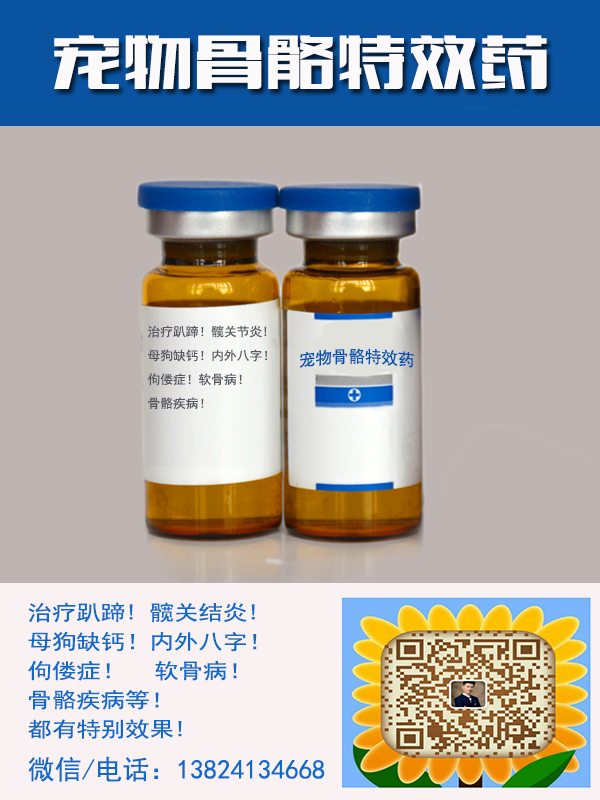
<style>
.page{position:relative;width:600px;height:800px;background:#beb4b2}
.page>*{position:absolute;margin:0}
.t1{font:71.8px "FZCTHJW--GB1-0";color:#fbf9f9}
.t2{font:12.5px/23.9px "SimHei";color:#595762}
.t3{font:16.3px "SimHei";color:#0152b6}
.t4{font:20.8px/29.2px "SimHei";color:#0f6ac9;scale:1.17 1}
.t5{font:27.1px "SimHei";color:#0f6ac9}
</style>
<div class="page">
<p class="t1" style="left:54px;top:35px;width:493px;height:54px">宠物骨骼特效药</p>
<p class="t2" style="left:147px;top:325px;width:120px;height:85px">治疗趴蹄！髋关节炎!<br>母狗缺钙！内外八字！<br>佝偻症！软骨病！<br>骨骼疾病！</p>
<p class="t3" style="left:299px;top:348px;width:115px;height:20px">宠物骨骼特效药</p>
<p class="t4" style="left:28px;top:602px;width:229px;height:137px">治疗趴蹄! 髋关结炎!<br>母狗缺钙！内外八字！<br>佝偻症！  软骨病！<br>骨骼疾病等！<br>都有特别效果!</p>
<p class="t5" style="left:28px;top:756px;width:297px;height:26px">微信/电话：13824134668</p>
</div>
